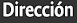
<style>
.page{position:relative;width:77px;height:23px;background:#333333}
.page>*{position:absolute;margin:0}
.t1{font:22.3px "AncizarSans-Bold";color:#fcfcfc;scale:0.85 1}
</style>
<div class="page">
<p class="t1" style="left:3px;top:1px;width:70px;height:16px">Dirección</p>
</div>
